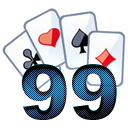
<style>
.page{position:relative;width:128px;height:128px;background:#ffffff}
.page>*{position:absolute;margin:0}
.t1{font:75.2px "Arial-Black"}
</style>
<div class="page">
<p class="t1" style="left:22px;top:64px;width:95px;height:56px">99</p>
</div>
